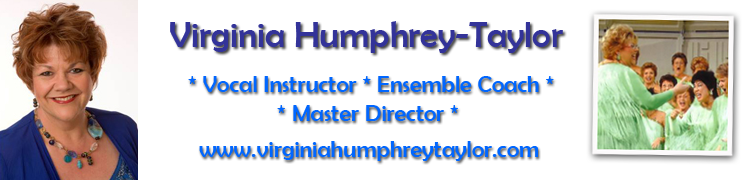
<style>
.page{position:relative;width:750px;height:180px;background:#ffffff}
.page>*{position:absolute;margin:0}
.t1{font:36px "BerlinSansFB-Reg";color:#333399}
.t2{font:24px "BerlinSansFB-Reg";color:#0066ff}
</style>
<div class="page">
<p class="t1" style="left:170px;top:21px;width:393px;height:32px">Virginia Humphrey-Taylor</p>
<p class="t2" style="left:188px;top:76px;width:366px;height:45px;text-align:center">* Vocal Instructor * Ensemble Coach *<br>* Master Director *</p>
<p class="t2" style="left:199px;top:141px;width:339px;height:20px">www.virginiahumphreytaylor.com</p>
</div>
